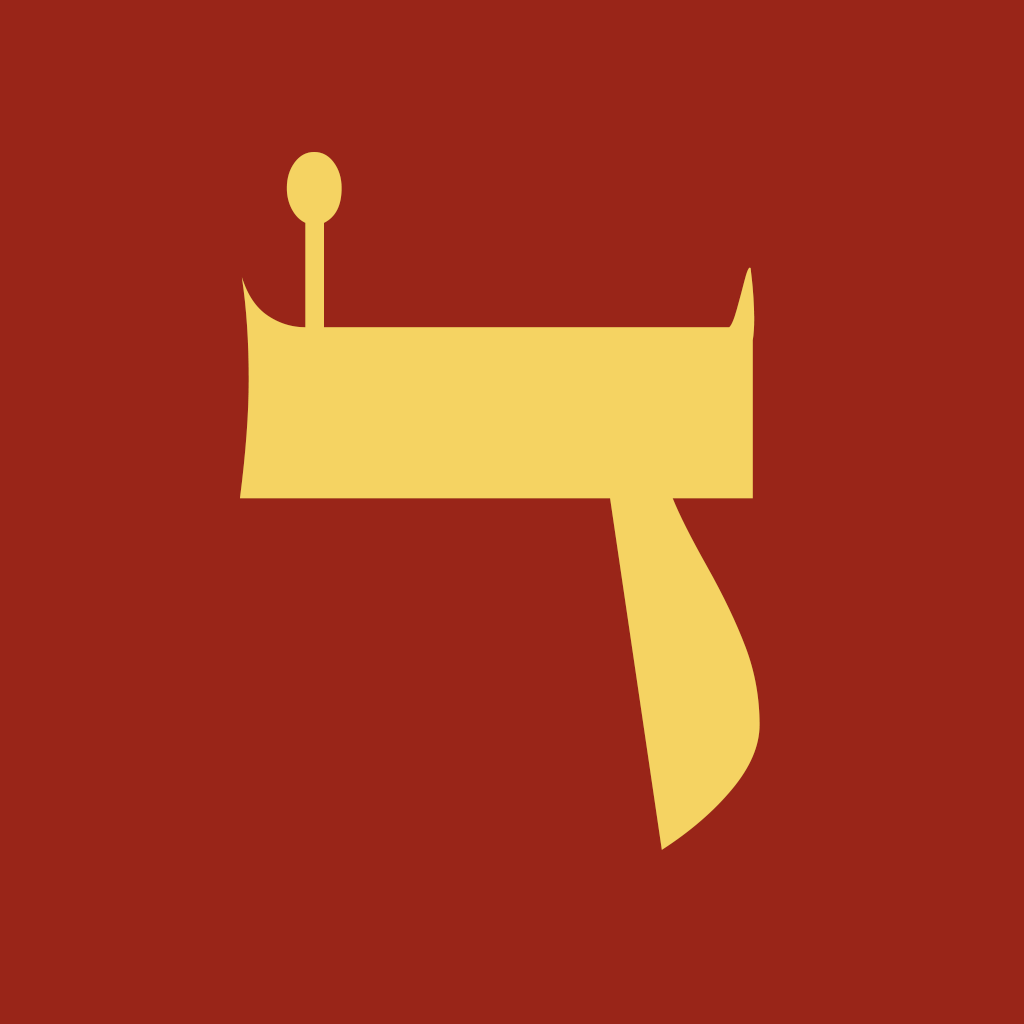
<style>
.page{position:relative;width:1024px;height:1024px;background:#992518}
.page>*{position:absolute;margin:0}
.t1{font:1000px "StamAshkenazCLM";color:#f5d362}
</style>
<div class="page">
<p class="t1" style="left:240px;top:152px;width:520px;height:698px">ד</p>
</div>
